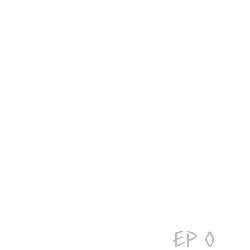
<style>
.page{position:relative;width:250px;height:250px;background:#ffffff}
.page>*{position:absolute;margin:0}
.t1{font:20.2px "AcadianRunes-Regular";color:#bbbbbb;text-transform:uppercase;scale:1.11 1}
</style>
<div class="page">
<p class="t1" style="left:173px;top:231px;width:41px;height:16px">EP 0</p>
</div>
